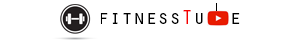
<style>
.page{position:relative;width:300px;height:40px;background:#ffffff}
.page>*{position:absolute;margin:0}
.t1{font:20px "OratorStd";color:#000000}
.t2{font:20px "OratorStd";color:#f50000}
</style>
<div class="page">
<p class="t1" style="left:100px;top:10px;width:140px;height:14px">fitness<span class="t2">T</span>u  e</p>
</div>
